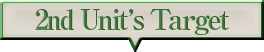
<style>
.page{position:relative;width:264px;height:52px;background:#ffffff}
.page>*{position:absolute;margin:0}
.t1{font:28px "RyuminPro-ExBold";letter-spacing:-0.08em;color:#3f723a}
.t2{font:28px "RyuminPro-ExBold";letter-spacing:-0.1em;color:#3f723a}
</style>
<div class="page">
<p class="t1" style="left:35px;top:9px;width:194px;height:26px"><span class="t2">2nd</span> Unit’s Target</p>
</div>
